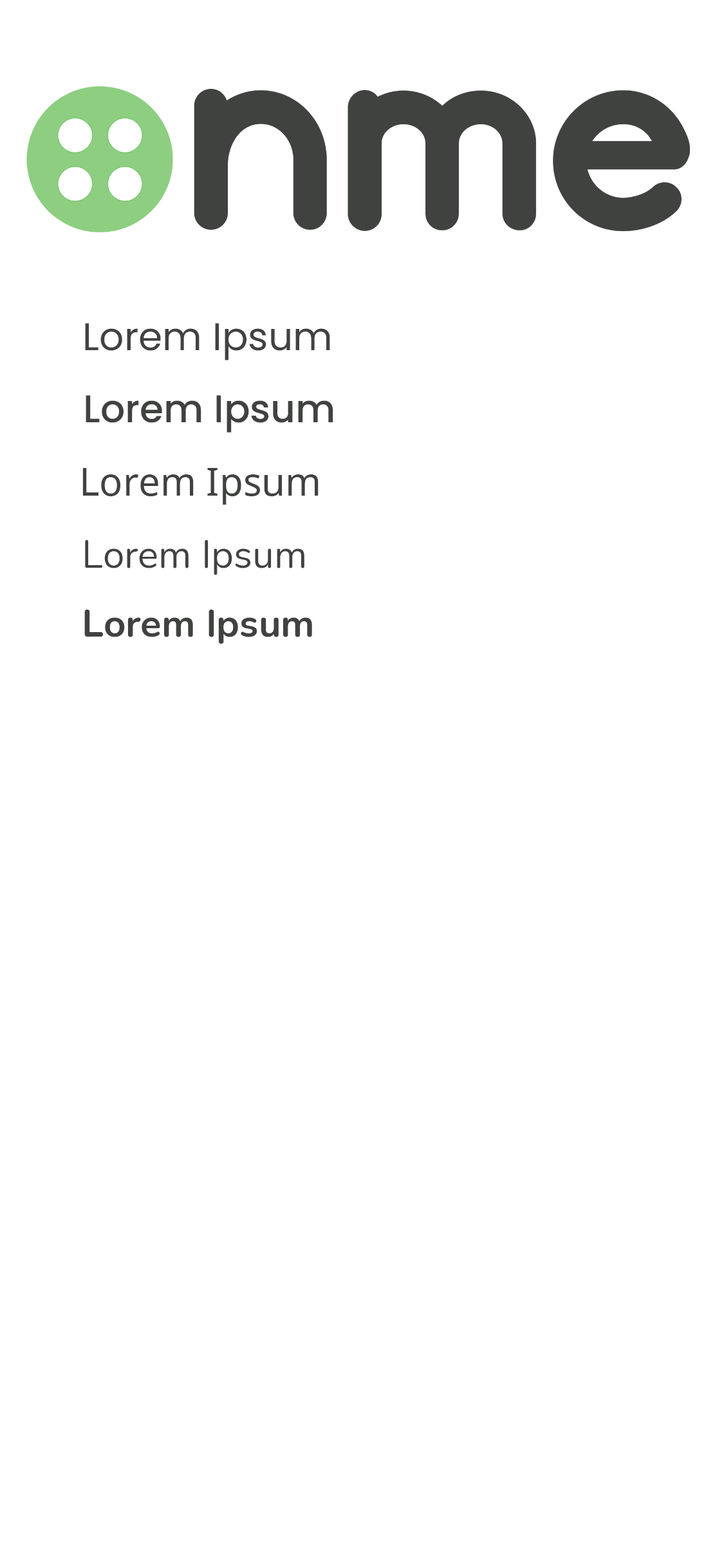
<style>
.page{position:relative;width:724px;height:1568px;background:#ffffff}
.page>*{position:absolute;margin:0}
.t1{font:38.6px "Poppins-Regular";color:#404240}
.t2{font:38.6px "Poppins-Medium";color:#404240}
.t3{font:38.6px "NotoSans";color:#404240}
.t4{font:38.6px "Nunito-Regular";color:#404240}
.t5{font:38.6px "Nunito-Bold";color:#404240}
</style>
<div class="page">
<p class="t1" style="left:85px;top:323px;width:245px;height:37px">Lorem Ipsum</p>
<p class="t2" style="left:86px;top:395px;width:247px;height:38px">Lorem Ipsum</p>
<p class="t3" style="left:82px;top:468px;width:237px;height:37px">Lorem Ipsum</p>
<p class="t4" style="left:85px;top:540px;width:219px;height:35px">Lorem Ipsum</p>
<p class="t5" style="left:84px;top:610px;width:228px;height:34px">Lorem Ipsum</p>
</div>
